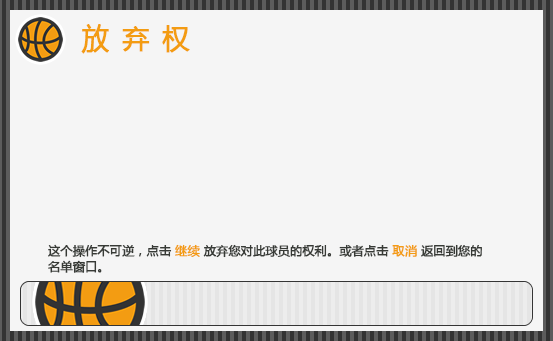
<style>
.page{position:relative;width:553px;height:341px;background:#f5f5f5}
.page>*{position:absolute;margin:0}
.t1{font:27px "MicrosoftYaHei";letter-spacing:0.46em;color:#f39c12;font-weight:bold}
.t2{font:12px/16px "MicrosoftYaHei";color:#373a36;font-weight:bold}
.t3{font:12px/16px "MicrosoftYaHei";color:#f39c12;font-weight:bold}
</style>
<div class="page">
<p class="t1" style="left:81px;top:24px;width:109px;height:30px">放弃权</p>
<p class="t2" style="left:48px;top:244px;width:434px;height:29px">这个操作不可逆，点击 <span class="t3">继续</span> 放弃您对此球员的权利。或者点击 <span class="t3">取消</span> 返回到您的<br>名单窗口。</p>
</div>
